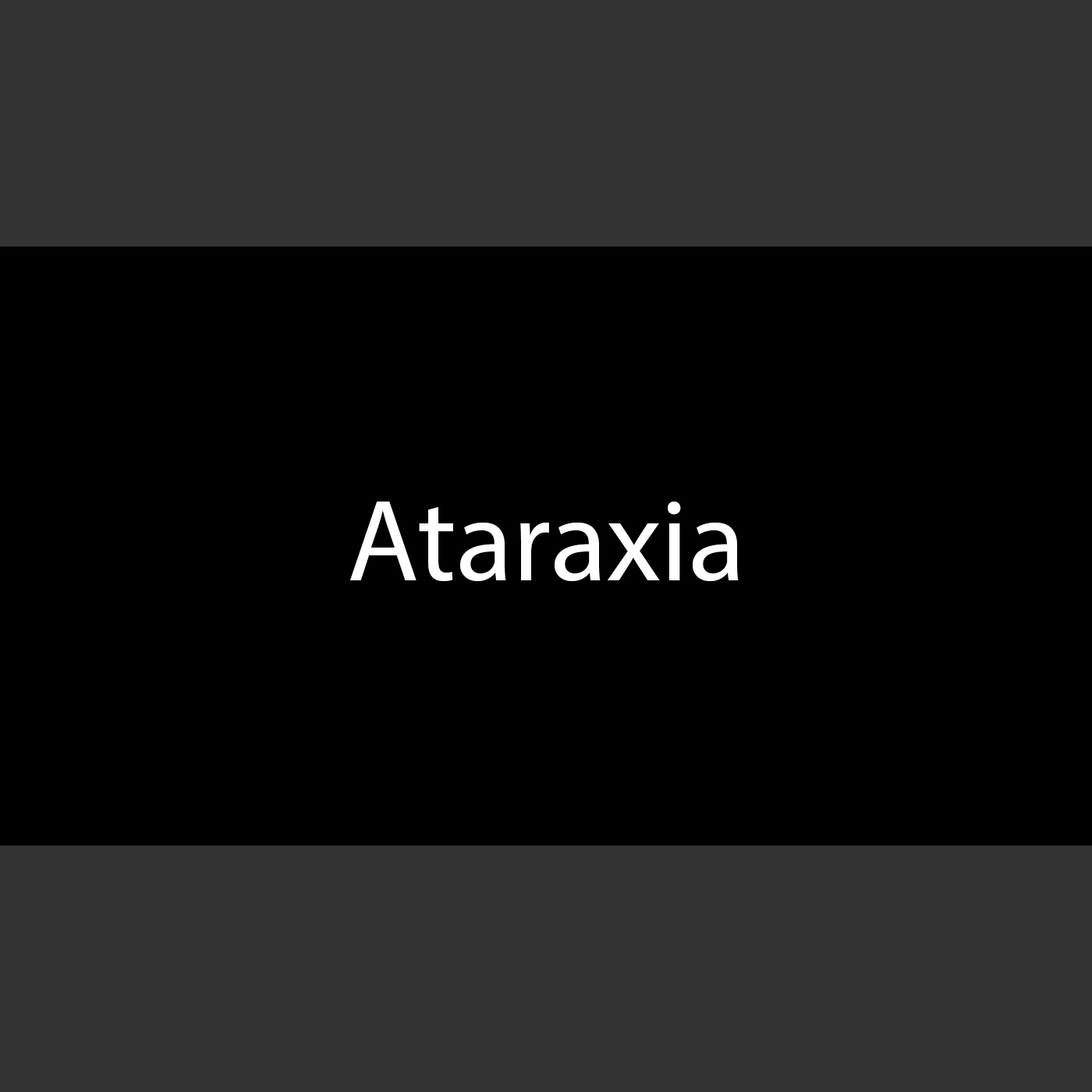
<style>
.page{position:relative;width:1092px;height:1092px;background:#000000}
.page>*{position:absolute;margin:0}
.t1{font:117px "MyriadPro-Regular";color:#ffffff}
</style>
<div class="page">
<p class="t1" style="left:350px;top:502px;width:389px;height:79px">Ataraxia</p>
</div>
